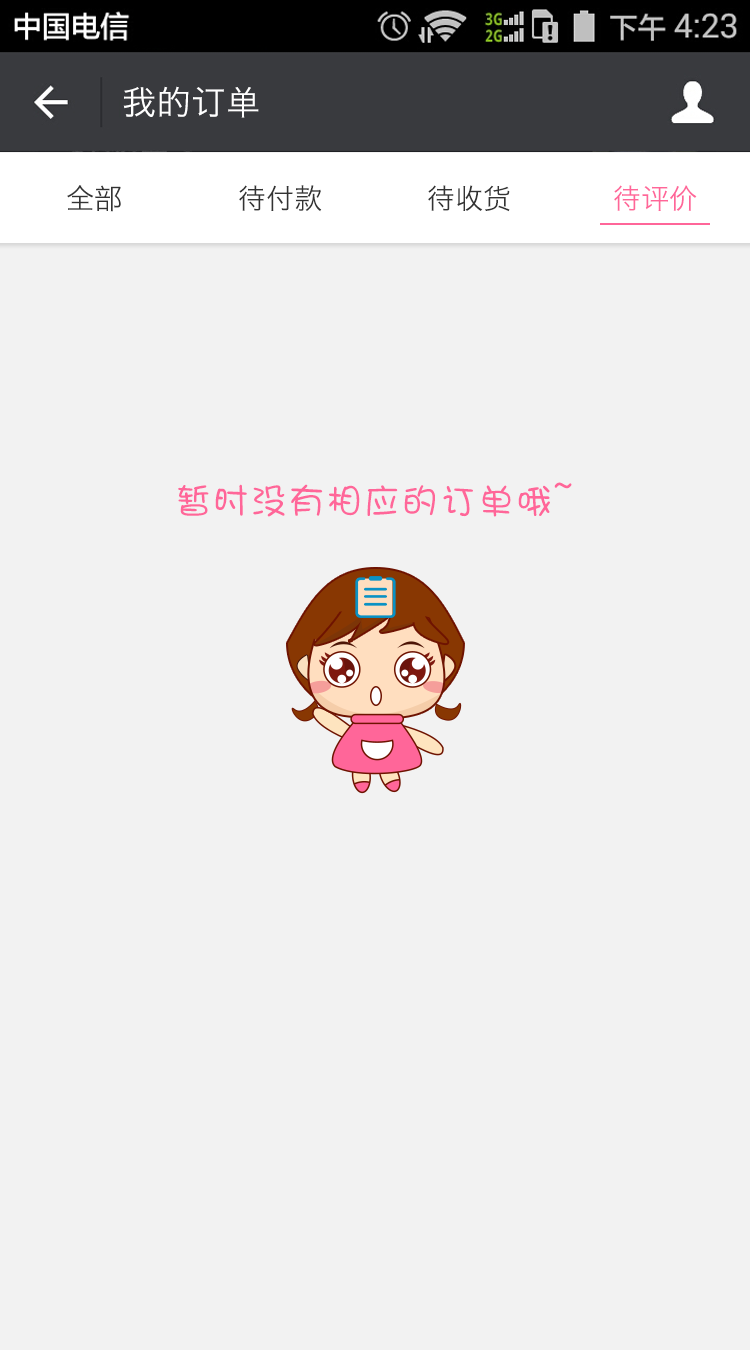
<style>
.page{position:relative;width:750px;height:1350px;background:#f2f2f2}
.page>*{position:absolute;margin:0}
.t1{font:34px "HiraginoSansGB-W3";letter-spacing:0.022em;color:#ffffff}
.t2{font:28px "HiraginoSansGB-W3";color:#333333}
.t3{font:28px "HiraginoSansGB-W3";color:#ff6699}
.t4{font:36px "DFShaoNvW5";letter-spacing:0.05em;color:#ff6699}
</style>
<div class="page">
<p class="t1" style="left:123px;top:86px;width:136px;height:32px">我的订单</p>
<p class="t2" style="left:67px;top:185px;width:54px;height:27px">全部</p>
<p class="t2" style="left:239px;top:185px;width:83px;height:27px">待付款</p>
<p class="t2" style="left:428px;top:185px;width:82px;height:27px">待收货</p>
<p class="t3" style="left:614px;top:185px;width:83px;height:26px">待评价</p>
<p class="t4" style="left:178px;top:482px;width:394px;height:35px">暂时没有相应的订单哦~</p>
</div>
